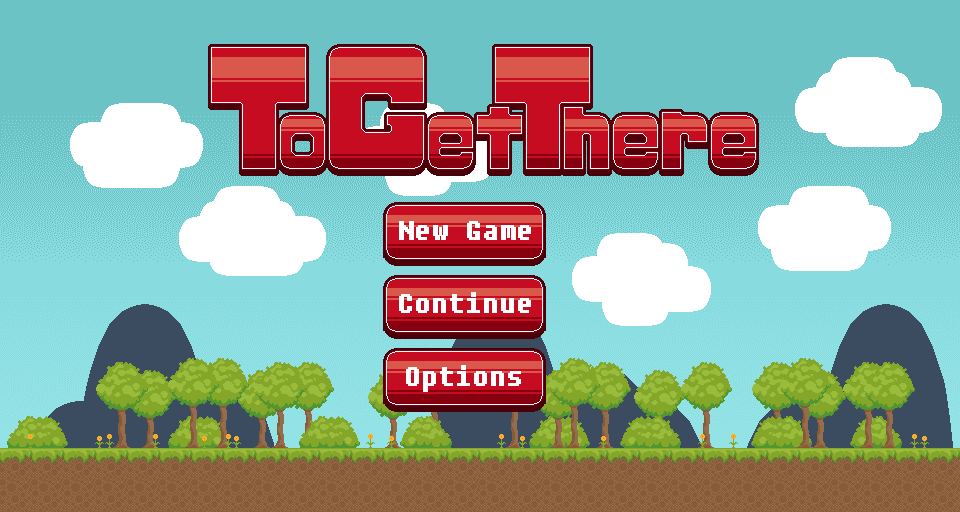
<style>
.page{position:relative;width:960px;height:512px;background:#6bc3c6}
.page>*{position:absolute;margin:0}
.t1{font:24px "Fixedsys";color:#ffffff;font-weight:bold}
</style>
<div class="page">
<p class="t1" style="left:399px;top:221px;width:132px;height:19px">New Game</p>
<p class="t1" style="left:399px;top:292px;width:132px;height:21px">Continue</p>
<p class="t1" style="left:406px;top:365px;width:115px;height:27px">Options</p>
</div>
